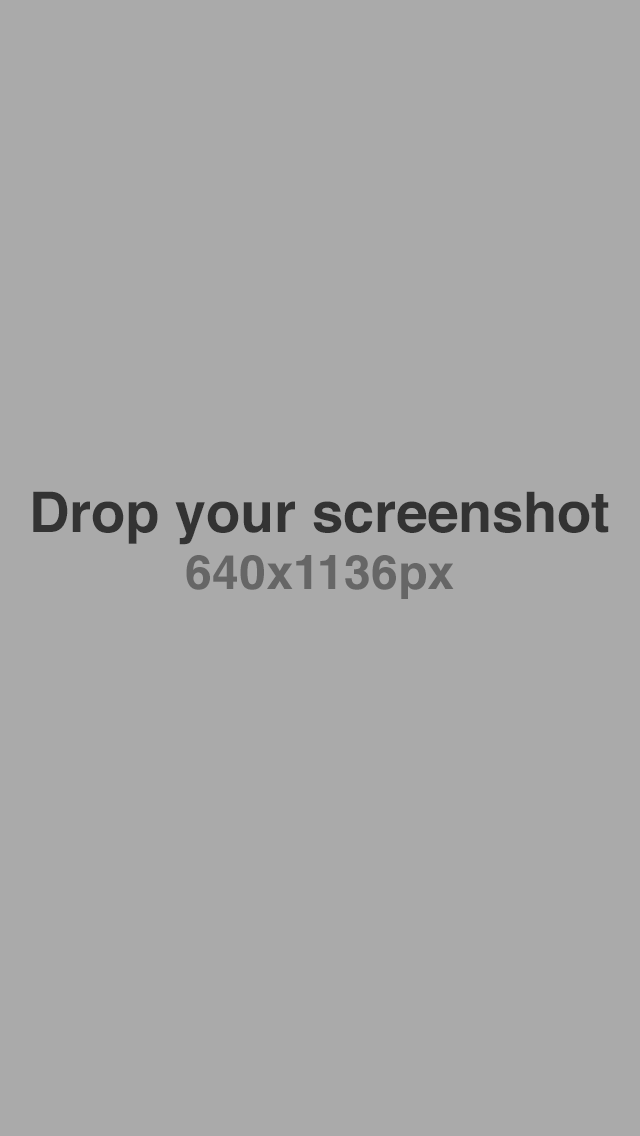
<style>
.page{position:relative;width:640px;height:1136px;background:#aaaaaa}
.page>*{position:absolute;margin:0}
.t1{font:56px "Helvetica-Bold";color:#333333}
.t2{font:48px "Helvetica-Bold";color:#666666}
</style>
<div class="page">
<p class="t1" style="left:33px;top:491px;width:576px;height:108px;text-align:center">Drop your screenshot<br><span class="t2">640x1136px</span></p>
</div>
